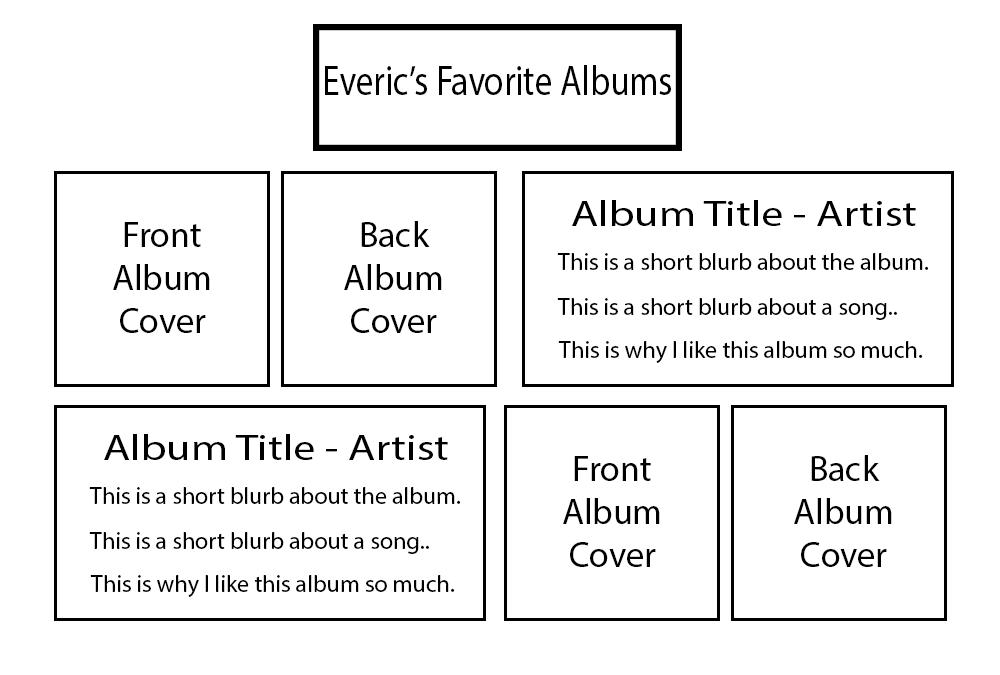
<style>
.page{position:relative;width:1000px;height:675px;background:#ffffff}
.page>*{position:absolute;margin:0}
.t1{font:42.2px "MyriadPro-Regular";color:#000000;scale:0.83 1}
.t2{font:36px "MyriadPro-Regular";color:#000000;scale:1.24 1}
.t3{font:36px "MyriadPro-Regular";color:#000000}
.t4{font:24px "MyriadPro-Regular";color:#000000}
</style>
<div class="page">
<p class="t1" style="left:325px;top:65px;width:346px;height:30px">Everic’s Favorite Albums</p>
<p class="t2" style="left:572px;top:200px;width:344px;height:26px">Album Title - Artist</p>
<p class="t3" style="left:113px;top:222px;width:97px;height:111px;text-align:center">Front<br>Album<br>Cover</p>
<p class="t3" style="left:344px;top:221px;width:98px;height:112px;text-align:center">Back<br>Album<br>Cover</p>
<p class="t4" style="left:557px;top:253px;width:372px;height:17px">This is a short blurb about the album.</p>
<p class="t4" style="left:557px;top:298px;width:340px;height:22px">This is a short blurb about a song..</p>
<p class="t4" style="left:558px;top:341px;width:365px;height:22px">This is why I like this album so much.</p>
<p class="t2" style="left:104px;top:434px;width:344px;height:26px">Album Title - Artist</p>
<p class="t3" style="left:563px;top:456px;width:97px;height:111px;text-align:center">Front<br>Album<br>Cover</p>
<p class="t3" style="left:794px;top:455px;width:98px;height:112px;text-align:center">Back<br>Album<br>Cover</p>
<p class="t4" style="left:89px;top:487px;width:372px;height:17px">This is a short blurb about the album.</p>
<p class="t4" style="left:89px;top:532px;width:340px;height:22px">This is a short blurb about a song..</p>
<p class="t4" style="left:90px;top:575px;width:365px;height:22px">This is why I like this album so much.</p>
</div>
